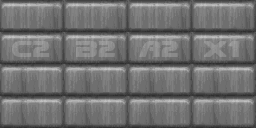
<style>
.page{position:relative;width:256px;height:128px;background:#6f6f6f}
.page>*{position:absolute;margin:0}
.t1{font:20px "DooM";color:#909090}
</style>
<div class="page">
<p class="t1" style="left:12px;top:41px;width:38px;height:16px">C2</p>
<p class="t1" style="left:76px;top:41px;width:39px;height:16px">B2</p>
<p class="t1" style="left:139px;top:41px;width:39px;height:16px">A2</p>
<p class="t1" style="left:204px;top:41px;width:35px;height:16px">X1</p>
</div>
